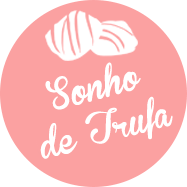
<style>
.page{position:relative;width:187px;height:187px;background:#fba1a1}
.page>*{position:absolute;margin:0}
.t1{font:30px/44px "BrannbollFet";color:#ffffff}
</style>
<div class="page">
<p class="t1" style="left:40px;top:62px;width:133px;height:97px;text-align:center;rotate:-15deg">Sonho<br>de Trufa</p>
</div>
